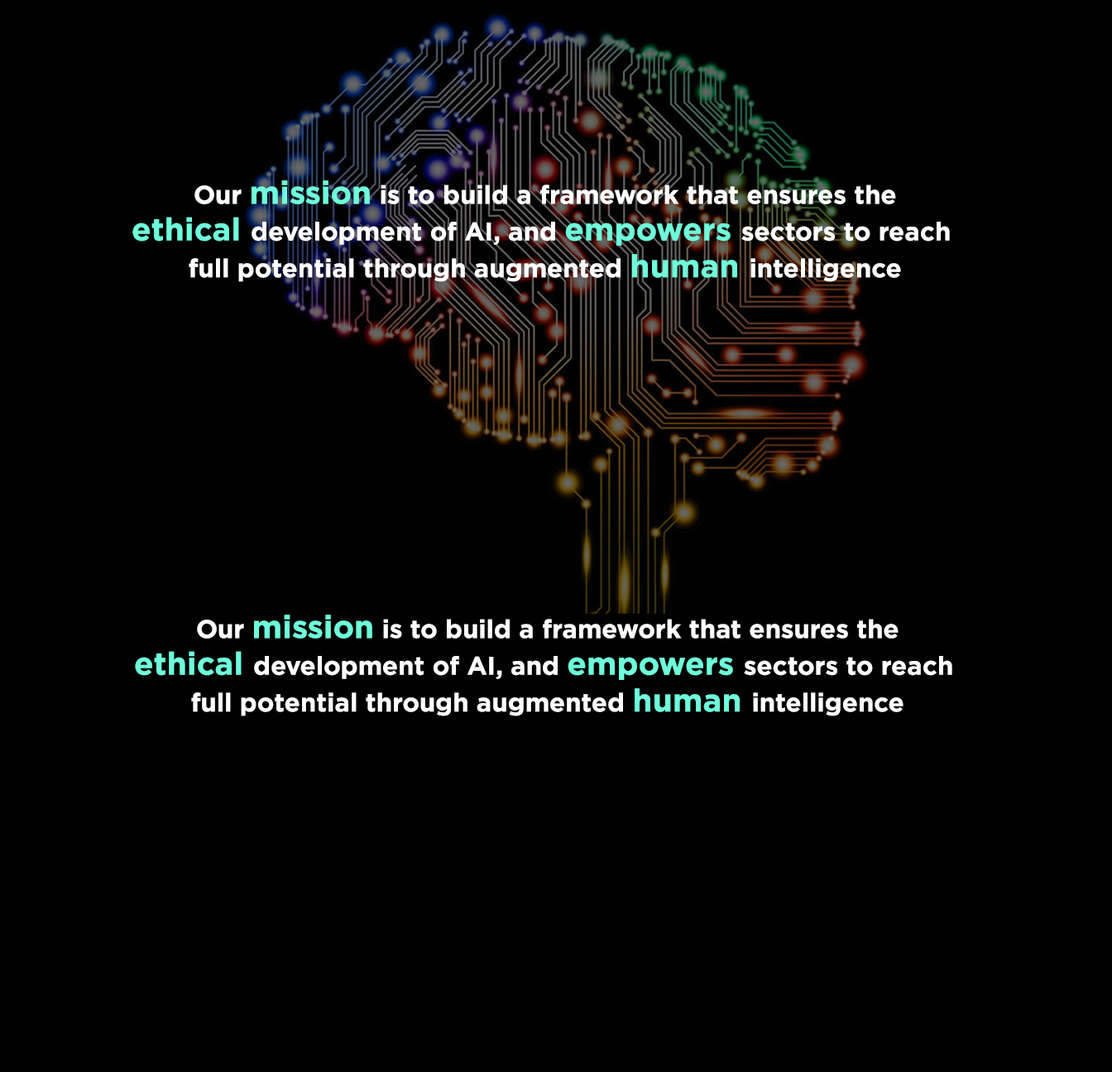
<style>
.page{position:relative;width:1112px;height:1072px;background:#000000}
.page>*{position:absolute;margin:0}
.t1{font:25.5px/36.8px "GothamHTF-Bold";color:#ffffff}
.t2{font:31.6px/36.8px "GothamHTF-Bold";color:#6effdb}
</style>
<div class="page">
<p class="t1" style="left:132px;top:180px;width:818px;height:102px;text-align:center">Our <span class="t2">mission </span>is to build a framework that ensures the<br><span class="t2">ethical </span>development of AI, and <span class="t2">empowers </span>sectors to reach <br>full potential through augmented <span class="t2">human </span>intelligence</p>
<p class="t1" style="left:135px;top:615px;width:817px;height:102px;text-align:center">Our <span class="t2">mission </span>is to build a framework that ensures the<br><span class="t2">ethical </span>development of AI, and <span class="t2">empowers </span>sectors to reach <br>full potential through augmented <span class="t2">human </span>intelligence</p>
</div>
